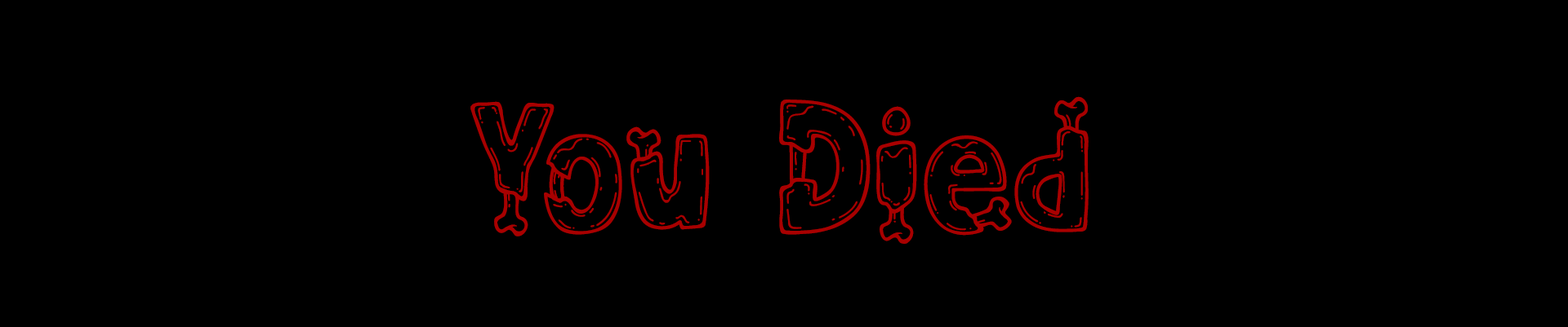
<style>
.page{position:relative;width:1568px;height:327px;background:#000000}
.page>*{position:absolute;margin:0}
.t1{font:170.1px "Zoombieland";color:#a80000}
</style>
<div class="page">
<p class="t1" style="left:470px;top:96px;width:619px;height:148px">You Died</p>
</div>
